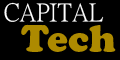
<style>
.page{position:relative;width:120px;height:60px;background:#000000}
.page>*{position:absolute;margin:0}
.t1{font:25px "PMingLiU-ExtB";color:#ffffff}
.t2{font:37.5px "CooperBlackStd";color:#ad8a00}
</style>
<div class="page">
<p class="t1" style="left:4px;top:2px;width:100px;height:20px">CAPITAL</p>
<p class="t2" style="left:21px;top:24px;width:95px;height:28px">Tech</p>
</div>
